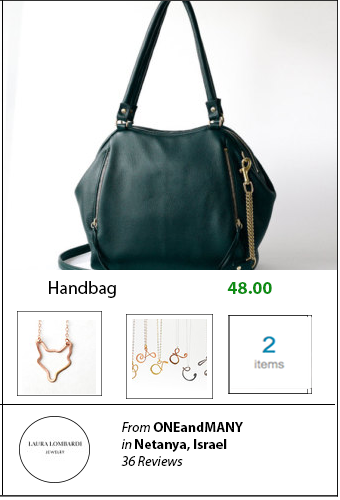
<style>
.page{position:relative;width:340px;height:500px;background:#ffffff}
.page>*{position:absolute;margin:0}
.t1{font:18px "MyriadPro-Regular";color:#000000}
.t2{font:18px "MyriadPro-Bold";color:#0e8d14}
.t3{font:14px "MyriadPro-Bold";color:#000000}
.t4{font:14px "MyriadPro-It";color:#000000}
</style>
<div class="page">
<p class="t1" style="left:49px;top:281px;width:223px;height:17px">Handbag    <span class="t2">48.00</span></p>
<p class="t3" style="left:121px;top:422px;width:122px;height:44px"><span class="t4"><br>From </span>ONEandMANY <br><span class="t4">in </span>Netanya, Israel<br><span class="t4">36 Reviews</span></p>
</div>
